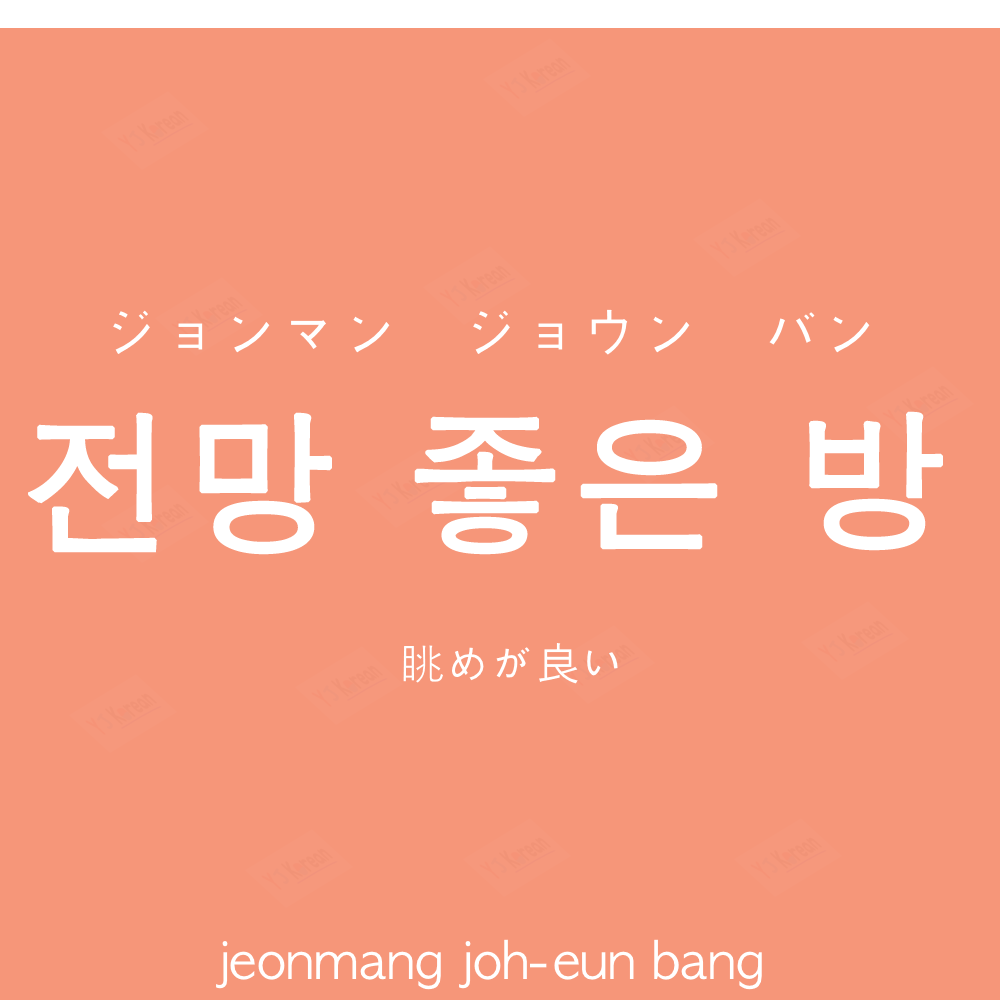
<style>
.page{position:relative;width:1000px;height:1000px;background:#f69679}
.page>*{position:absolute;margin:0}
.t1{font:60px "AppleGothic";color:#ffffff}
.t2{font:154px "AppleGothic";letter-spacing:0.04em;color:#ffffff;font-weight:bold}
.t3{font:45px "AppleGothic";color:#ffffff}
.t4{font:50px "AppleGothic";color:#ffffff}
</style>
<div class="page">
<p class="t1" style="left:113px;top:309px;width:757px;height:46px">ジョンマン　ジョウン　バン</p>
<p class="t2" style="left:28px;top:411px;width:915px;height:144px">전망 좋은 방</p>
<p class="t3" style="left:403px;top:643px;width:215px;height:41px">眺めが良い</p>
<p class="t4" style="left:216px;top:939px;width:546px;height:51px">jeonmang joh-eun bang</p>
</div>
